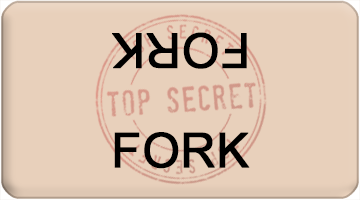
<style>
.page{position:relative;width:360px;height:200px;background:#e8d0bb}
.page>*{position:absolute;margin:0}
.t1{font:48px "ArialMT";color:#000000;font-weight:bold}
</style>
<div class="page">
<p class="t1" style="left:112px;top:32px;width:135px;height:37px;rotate:180deg">FORK</p>
<p class="t1" style="left:114px;top:132px;width:136px;height:37px">FORK</p>
</div>
